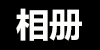
<style>
.page{position:relative;width:100px;height:50px;background:#000000}
.page>*{position:absolute;margin:0}
.t1{font:33.3px "MicrosoftYaHei-Bold";color:#fdfdfc}
</style>
<div class="page">
<p class="t1" style="left:16px;top:8px;width:66px;height:33px">相册</p>
</div>
